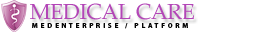
<style>
.page{position:relative;width:264px;height:33px;background:#ffffff}
.page>*{position:absolute;margin:0}
.t1{font:22px "PalatinoLinotype-Roman";letter-spacing:-0.025em;color:#b346b7;text-transform:uppercase}
.t2{font:7px "MyriadPro-Bold";letter-spacing:0.4em;color:#040404;text-transform:uppercase}
</style>
<div class="page">
<p class="t1" style="left:30px;top:3px;width:164px;height:17px">MEDICAL CARE</p>
<p class="t2" style="left:32px;top:23px;width:156px;height:6px">medenterprise / PLATFORM</p>
</div>
